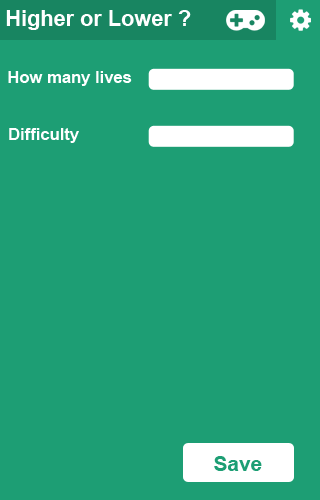
<style>
.page{position:relative;width:320px;height:500px;background:#1d9e74}
.page>*{position:absolute;margin:0}
.t1{font:21.7px "Arial-BoldMT";color:#ffffff}
.t2{font:16.6px "Arial-BoldMT";color:#ffffff}
.t3{font:20.9px "Arial-BoldMT";color:#1d9e74}
</style>
<div class="page">
<p class="t1" style="left:6px;top:10px;width:185px;height:20px">Higher or Lower ?</p>
<p class="t2" style="left:8px;top:71px;width:124px;height:15px">How many lives</p>
<p class="t2" style="left:9px;top:128px;width:70px;height:15px">Difficulty</p>
<p class="t3" style="left:214px;top:456px;width:48px;height:15px">Save</p>
</div>
